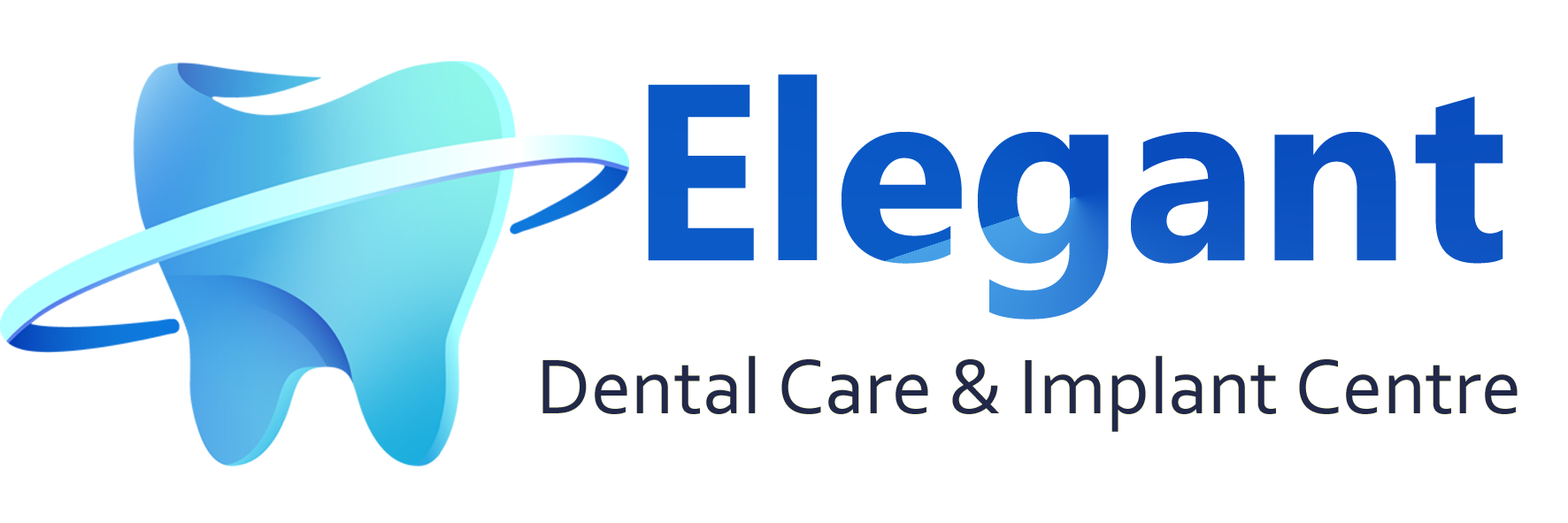
<style>
.page{position:relative;width:1568px;height:523px;background:#ffffff}
.page>*{position:absolute;margin:0}
.t1{font:250.7px "MyanmarText-Bold";color:#0b58c5}
.t2{font:81.1px "Corbel";color:#212849}
</style>
<div class="page">
<p class="t1" style="left:648px;top:74px;width:855px;height:245px">Elegant</p>
<p class="t2" style="left:542px;top:356px;width:976px;height:76px">Dental Care &amp; Implant Centre</p>
</div>
